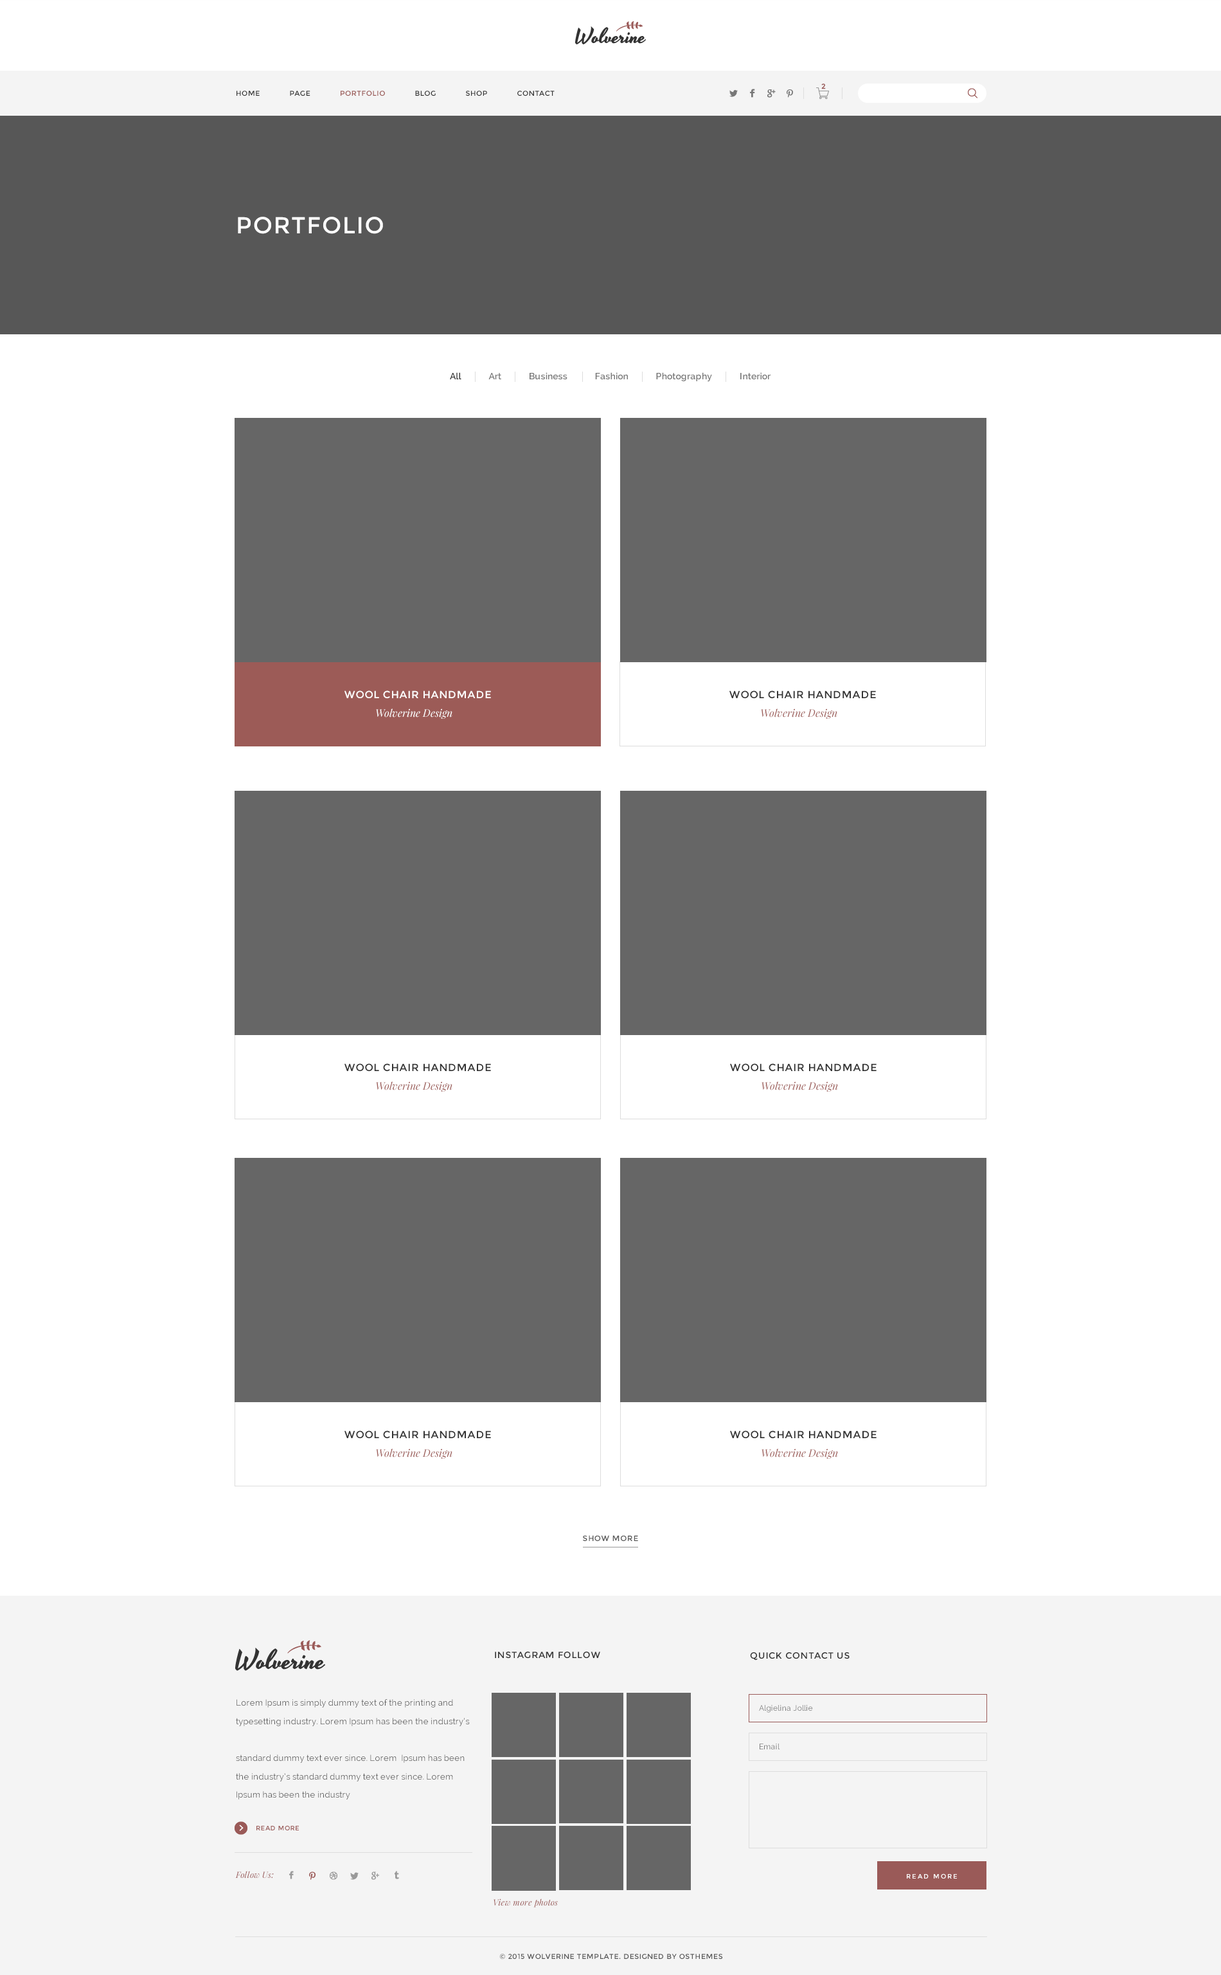
<style>
.page{position:relative;width:1221px;height:1975px;background:#ffffff}
.page>*{position:absolute;margin:0}
.t1{font:7.1px "Montserrat-Regular";color:#9a5a58;font-weight:bold}
.t2{font:7.1px "Montserrat-Regular";letter-spacing:0.05em;color:#333333}
.t3{font:7.1px "Montserrat-Regular";letter-spacing:0.05em;color:#9b5a57}
.t4{font:23.1px "Montserrat-Regular";letter-spacing:0.05em;color:#ffffff}
.t5{font:9px "Raleway-SemiBold";letter-spacing:0.02em;color:#777777}
.t6{font:9px "Raleway-SemiBold";letter-spacing:0.02em;color:#333333}
.t7{font:10.3px "Montserrat-Regular";letter-spacing:0.05em;color:#ffffff}
.t8{font:10.3px "Montserrat-Regular";letter-spacing:0.05em;color:#333333}
.t9{font:10.3px "PlayfairDisplay-Italic";color:#ffffff}
.t10{font:10.3px "PlayfairDisplay-Italic";color:#9c5b57}
.t11{font:7.7px "Montserrat-Regular";letter-spacing:0.05em;color:#555555}
.t12{font:9px "Montserrat-Regular";letter-spacing:0.05em;color:#333333}
.t13{font:8.4px/18.4px "Raleway";letter-spacing:0.02em;color:#555555}
.t14{font:7.7px "Raleway";letter-spacing:0.02em;color:#777777}
.t15{font:6.4px "Montserrat-Regular";letter-spacing:0.05em;color:#9a5a58}
.t16{font:8.4px "PlayfairDisplay-Italic";letter-spacing:0.02em;color:#995958}
.t17{font:6.4px "Montserrat-Regular";letter-spacing:0.2em;color:#ffffff}
.t18{font:8.4px "PlayfairDisplay-Italic";letter-spacing:0.02em;color:#9a5a58}
.t19{font:7.1px "Montserrat-Regular";letter-spacing:0.05em;color:#555555}
</style>
<div class="page">
<p class="t1" style="left:822px;top:84px;width:4px;height:5px">2</p>
<p class="t2" style="left:237px;top:91px;width:318px;height:5px">HOME      PAGE      <span class="t3">PORTFOLIO</span>      BLOG      SHOP      CONTACT</p>
<p class="t4" style="left:238px;top:217px;width:145px;height:17px">PORTFOLIO</p>
<p class="t5" style="left:450px;top:372px;width:321px;height:10px"><span class="t6">All</span>             Art             Business             Fashion             Photography             Interior</p>
<p class="t7" style="left:345px;top:690px;width:146px;height:9px">WOOL CHAIR HANDMADE</p>
<p class="t8" style="left:730px;top:690px;width:146px;height:9px">WOOL CHAIR HANDMADE</p>
<p class="t9" style="left:376px;top:708px;width:77px;height:11px">Wolverine Design</p>
<p class="t10" style="left:761px;top:708px;width:77px;height:11px">Wolverine Design</p>
<p class="t8" style="left:345px;top:1063px;width:146px;height:9px">WOOL CHAIR HANDMADE</p>
<p class="t8" style="left:730px;top:1063px;width:147px;height:9px">WOOL CHAIR HANDMADE</p>
<p class="t10" style="left:376px;top:1081px;width:77px;height:11px">Wolverine Design</p>
<p class="t10" style="left:762px;top:1081px;width:76px;height:11px">Wolverine Design</p>
<p class="t8" style="left:345px;top:1430px;width:146px;height:9px">WOOL CHAIR HANDMADE</p>
<p class="t8" style="left:730px;top:1430px;width:147px;height:9px">WOOL CHAIR HANDMADE</p>
<p class="t10" style="left:376px;top:1448px;width:77px;height:11px">Wolverine Design</p>
<p class="t10" style="left:762px;top:1448px;width:76px;height:11px">Wolverine Design</p>
<p class="t11" style="left:583px;top:1535px;width:55px;height:6px">SHOW MORE</p>
<p class="t12" style="left:495px;top:1652px;width:105px;height:6px">INSTAGRAM FOLLOW</p>
<p class="t12" style="left:750px;top:1652px;width:100px;height:8px">QUICK CONTACT US</p>
<p class="t13" style="left:236px;top:1699px;width:234px;height:100px">Lorem Ipsum is simply dummy text of the printing and typesetting industry. Lorem Ipsum has been the industry’s <br> <br>standard dummy text ever since. Lorem  Ipsum has been the industry’s standard dummy text ever since. Lorem  Ipsum has been the industry</p>
<p class="t14" style="left:759px;top:1705px;width:54px;height:8px">Algielina Jollie</p>
<p class="t14" style="left:760px;top:1743px;width:20px;height:6px">Email</p>
<p class="t15" style="left:256px;top:1825px;width:43px;height:5px">READ MORE</p>
<p class="t16" style="left:235px;top:1871px;width:39px;height:7px">Follow Us:</p>
<p class="t17" style="left:907px;top:1873px;width:50px;height:5px">READ MORE</p>
<p class="t18" style="left:494px;top:1898px;width:64px;height:9px">View more photos</p>
<p class="t19" style="left:500px;top:1954px;width:223px;height:5px">© 2015 WOLVERINE TEMPLATE. DESIGNED BY OSTHEMES</p>
</div>
